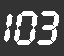
<style>
.page{position:relative;width:64px;height:56px;background:#333333}
.page>*{position:absolute;margin:0}
.t1{font:43px "MouseRealLEDU";color:#ffffff}
</style>
<div class="page">
<p class="t1" style="left:4px;top:11px;width:55px;height:34px">103</p>
</div>
